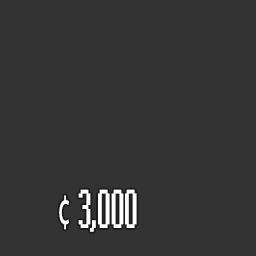
<style>
.page{position:relative;width:256px;height:256px;background:#333333}
.page>*{position:absolute;margin:0}
.t1{font:49px "System";letter-spacing:-0.08em;color:#ffffff;scale:0.5 1}
.t2{font:49px "MyriadPro-Regular";letter-spacing:-0.08em;color:#ffffff;scale:0.5 1}
</style>
<div class="page">
<p class="t1" style="left:59px;top:189px;width:78px;height:43px"><span class="t2">¢   </span>3,000</p>
</div>
